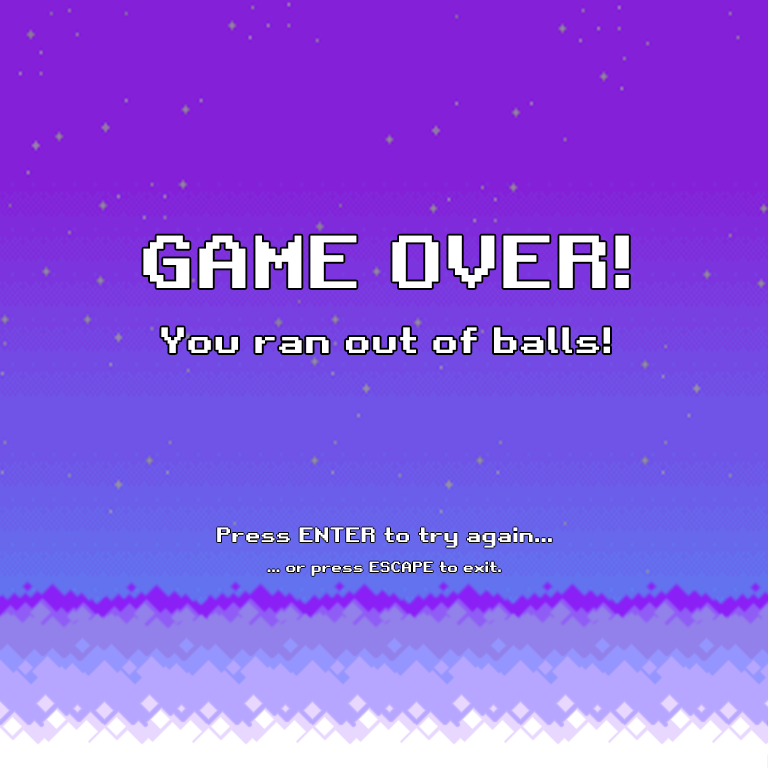
<style>
.page{position:relative;width:768px;height:768px;background:#8421d8}
.page>*{position:absolute;margin:0}
.t1{font:72px "RetroGaming";color:#ffffff}
.t2{font:35px "RetroGaming";color:#ffffff}
.t3{font:20px "RetroGaming";color:#ffffff}
.t4{font:14px "RetroGaming";color:#ffffff}
</style>
<div class="page">
<p class="t1" style="left:143px;top:235px;width:486px;height:53px">GAME OVER!</p>
<p class="t2" style="left:161px;top:327px;width:449px;height:26px">You ran out of balls!</p>
<p class="t3" style="left:217px;top:527px;width:335px;height:21px">Press ENTER to try again...</p>
<p class="t4" style="left:267px;top:561px;width:234px;height:15px">... or press ESCAPE to exit.</p>
</div>
